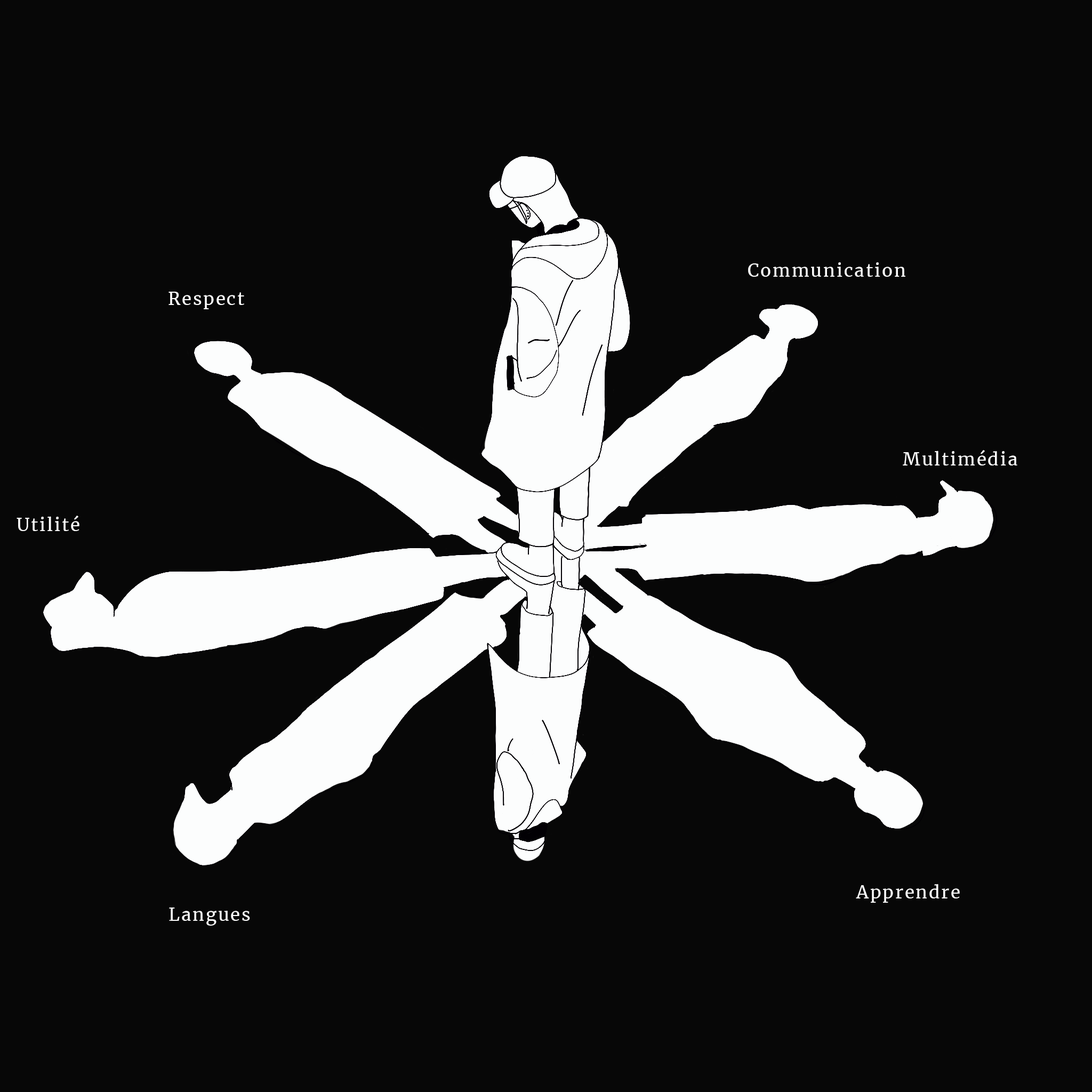
<style>
.page{position:relative;width:1092px;height:1092px;background:#070707}
.page>*{position:absolute;margin:0}
.t1{font:17.6px "Merriweather-Regular";letter-spacing:0.085em;color:#ffffff}
</style>
<div class="page">
<p class="t1" style="left:748px;top:262px;width:157px;height:15px">Communication</p>
<p class="t1" style="left:168px;top:292px;width:76px;height:17px">Respect</p>
<p class="t1" style="left:903px;top:450px;width:114px;height:15px">Multimédia</p>
<p class="t1" style="left:17px;top:516px;width:62px;height:15px">Utilité</p>
<p class="t1" style="left:856px;top:884px;width:104px;height:19px">Apprendre</p>
<p class="t1" style="left:169px;top:907px;width:81px;height:19px">Langues</p>
</div>
